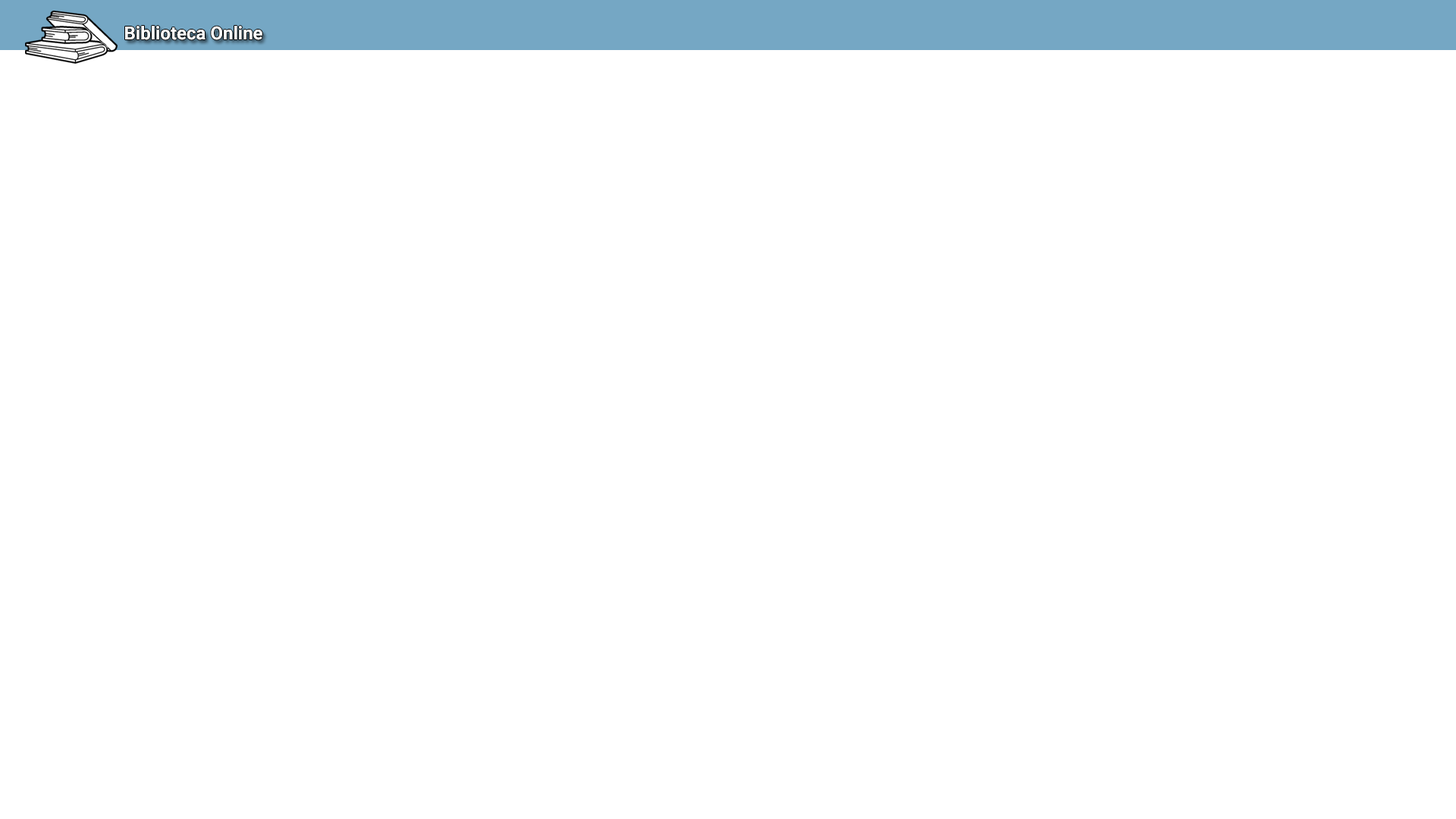
<style>
.page{position:relative;width:1456px;height:819px;background:#ffffff}
.page>*{position:absolute;margin:0}
.t1{font:18.2px "Roboto-Bold";color:#ffffff}
</style>
<div class="page">
<p class="t1" style="left:125px;top:26px;width:137px;height:14px">Biblioteca Online</p>
</div>
